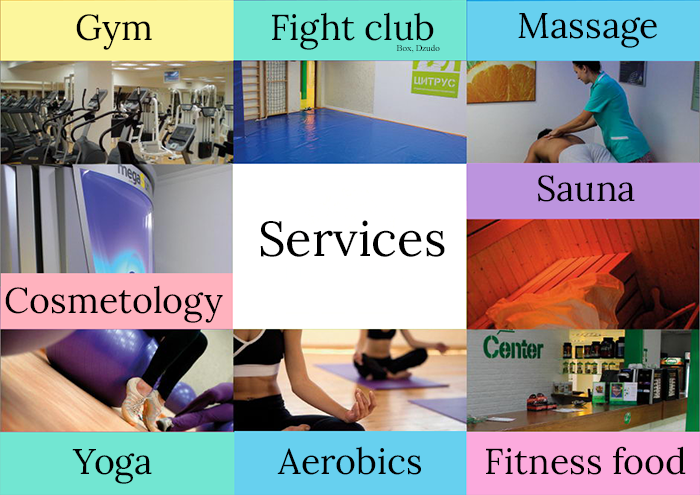
<style>
.page{position:relative;width:700px;height:495px}
.page>*{position:absolute;margin:0}
.t1{font:35.7px "Lora-Regular";color:#000000}
.t2{font:8.9px "TimesNewRomanPSMT";color:#000000}
.t3{font:48.7px "Lora-Regular";color:#000000}
</style>
<div class="page">
<p class="t1" style="left:76px;top:14px;width:76px;height:36px">Gym</p>
<p class="t1" style="left:272px;top:12px;width:162px;height:38px">Fight club</p>
<p class="t1" style="left:518px;top:13px;width:139px;height:35px">Massage</p>
<p class="t2" style="left:396px;top:44px;width:44px;height:9px">Box, Dzudo</p>
<p class="t1" style="left:538px;top:175px;width:97px;height:27px">Sauna</p>
<p class="t3" style="left:260px;top:220px;width:185px;height:37px">Services</p>
<p class="t1" style="left:5px;top:285px;width:218px;height:38px">Cosmetology</p>
<p class="t1" style="left:72px;top:449px;width:80px;height:35px">Yoga</p>
<p class="t1" style="left:277px;top:446px;width:144px;height:29px">Aerobics</p>
<p class="t1" style="left:486px;top:446px;width:200px;height:29px">Fitness food</p>
</div>
